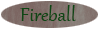
<style>
.page{position:relative;width:100px;height:30px;background:#ffffff}
.page>*{position:absolute;margin:0}
.t1{font:24px "Gabriola";color:#0f4615}
</style>
<div class="page">
<p class="t1" style="left:20px;top:5px;width:56px;height:16px">Fireball</p>
</div>
